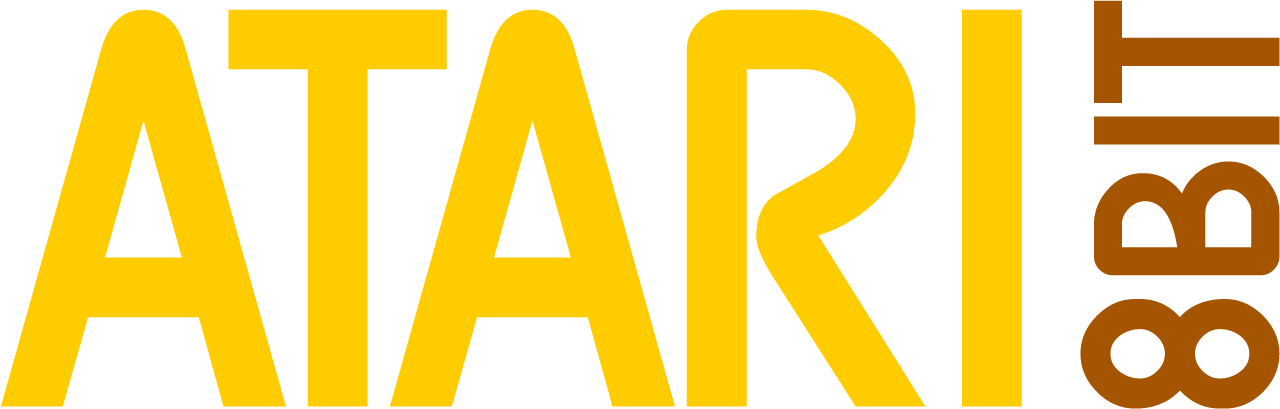
<style>
.page{position:relative;width:1280px;height:409px;background:#ffffff}
.page>*{position:absolute;margin:0}
.t1{font:277.8px "SFAtarianSystem";color:#a55500;text-transform:uppercase}
.t2{font:298px "SFAtarianSystem";color:#a55500;text-transform:uppercase}
.t3{font:594.8px "SFAtarianSystem";color:#ffcc00;text-transform:uppercase}
</style>
<div class="page">
<p class="t1" style="left:1080px;top:0px;width:200px;height:409px;rotate:-90deg"><span class="t2">8</span>bit</p>
<p class="t3" style="left:1px;top:9px;width:1021px;height:398px">ATARI</p>
</div>
